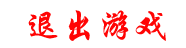
<style>
.page{position:relative;width:186px;height:48px;background:#ffffff}
.page>*{position:absolute;margin:0}
.t1{font:36px "STXingkai";color:#ff0404}
</style>
<div class="page">
<p class="t1" style="left:28px;top:10px;width:138px;height:31px">退出游戏</p>
</div>
